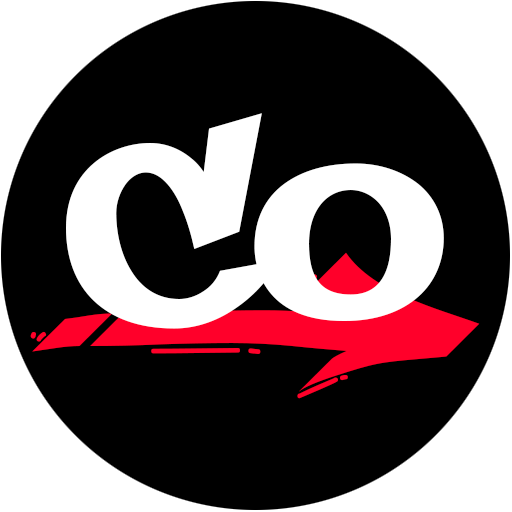
<style>
.page{position:relative;width:512px;height:512px;background:#000000}
.page>*{position:absolute;margin:0}
.t1{font:312.9px "PhillySans-Regular";color:#ffffff}
.t2{font:339.4px "MARSNEVENEKSK-Regular";color:#ff002a}
</style>
<div class="page">
<p class="t1" style="left:66px;top:113px;width:378px;height:216px">CO</p>
<p class="t2" style="left:30px;top:252px;width:450px;height:147px">&gt;</p>
</div>
